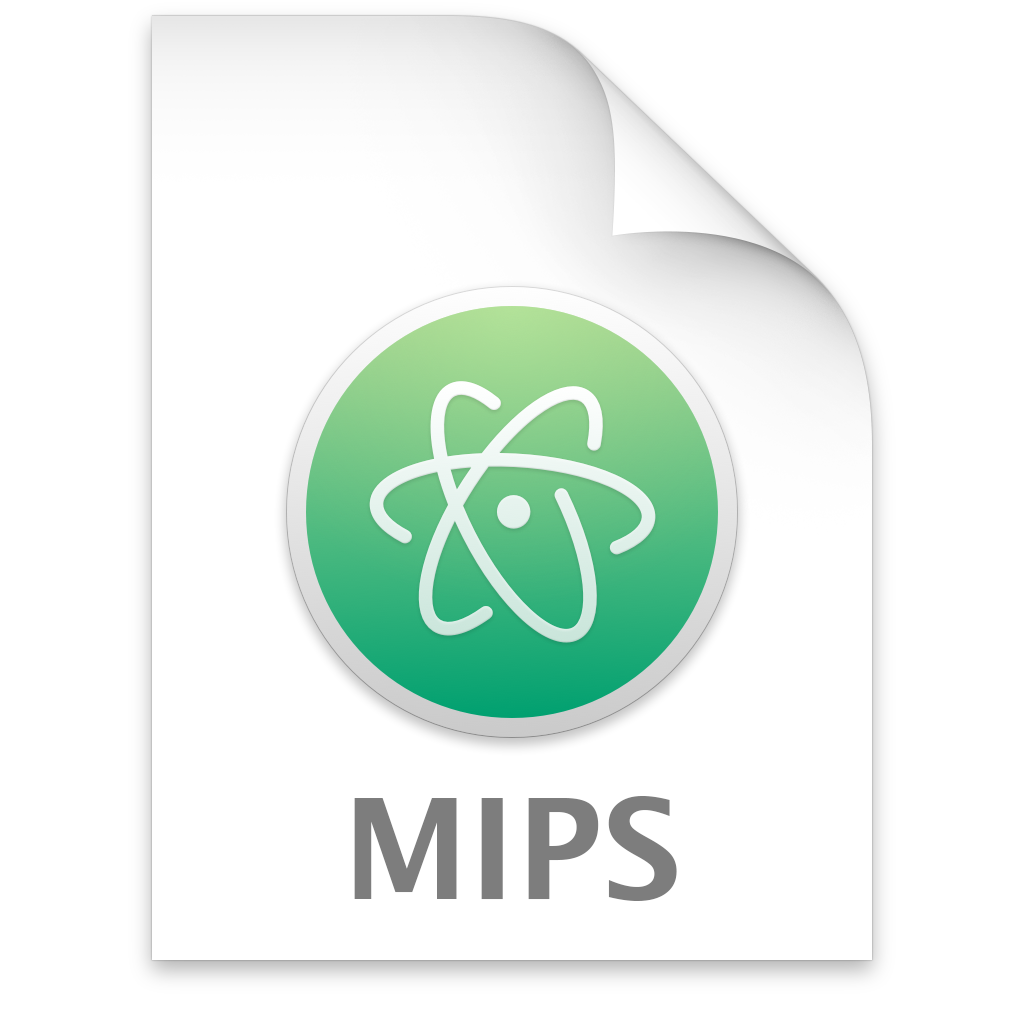
<style>
.page{position:relative;width:1024px;height:1024px;background:#ffffff}
.page>*{position:absolute;margin:0}
.t1{font:140px "LucidaGrande-Bold";color:#7d7d7d}
</style>
<div class="page">
<p class="t1" style="left:354px;top:796px;width:323px;height:105px">MIPS</p>
</div>
